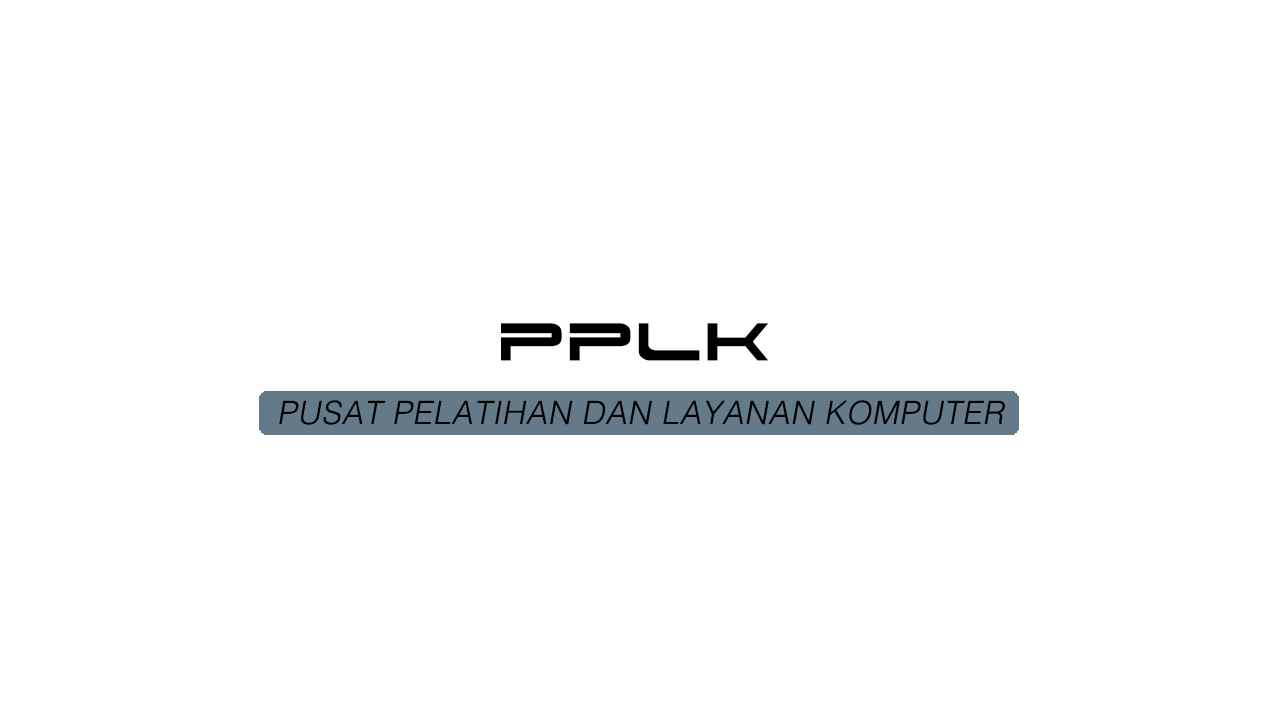
<style>
.page{position:relative;width:1280px;height:720px;background:#ffffff}
.page>*{position:absolute;margin:0}
.t1{font:64px "Dodger";letter-spacing:0.025em;color:#000000}
.t2{font:32px "HelvLight-Normal";letter-spacing:0.025em;color:#000000;font-style:italic}
</style>
<div class="page">
<p class="t1" style="left:501px;top:323px;width:268px;height:38px">PPLK</p>
<p class="t2" style="left:279px;top:400px;width:726px;height:25px">PUSAT PELATIHAN DAN LAYANAN KOMPUTER</p>
</div>
